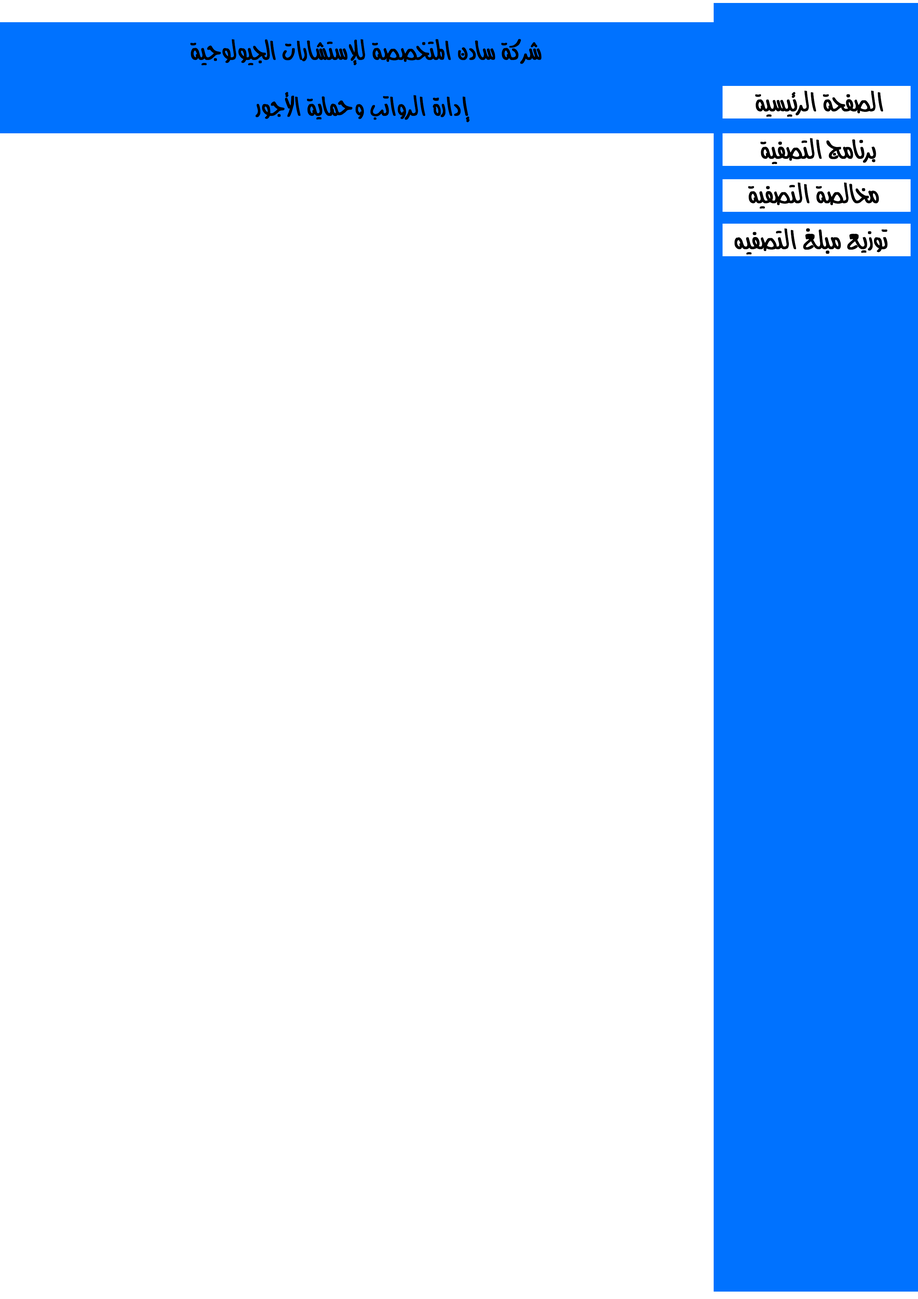
<style>
.page{position:relative;width:918px;height:1299px;background:#ffffff}
.page>*{position:absolute;margin:0}
.t1{font:27.8px "MCSFREEDOM";color:#000000;font-weight:bold}
</style>
<div class="page">
<p class="t1" style="left:190px;top:39px;width:352px;height:27px">شركة سادن المتخصصة للإستشارات الجيولوجية</p>
<p class="t1" style="left:255px;top:92px;width:215px;height:30px">إدارة الرواتب وحماية الأجور</p>
<p class="t1" style="left:755px;top:90px;width:128px;height:27px">الصفحة الرئيسية</p>
<p class="t1" style="left:760px;top:138px;width:116px;height:26px">برنامج التصفية</p>
<p class="t1" style="left:748px;top:182px;width:131px;height:27px">مخالصة التصفية</p>
<p class="t1" style="left:735px;top:228px;width:153px;height:27px">توزيع مبلغ التصفيه</p>
</div>
